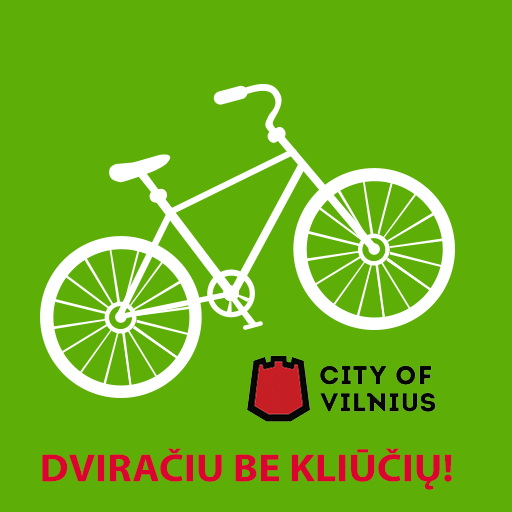
<style>
.page{position:relative;width:512px;height:512px;background:#5dae06}
.page>*{position:absolute;margin:0}
.t1{font:39.3px "MyriadPro-Bold";color:#db0330;scale:1.07 1}
</style>
<div class="page">
<p class="t1" style="left:42px;top:448px;width:410px;height:42px">DVIRAČIU BE KLIŪČIŲ!</p>
</div>
